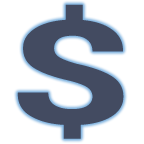
<style>
.page{position:relative;width:144px;height:144px;background:#ffffff}
.page>*{position:absolute;margin:0}
.t1{font:144px "Roboto-Bold";color:#4c4f58;scale:1.5 1}
</style>
<div class="page">
<p class="t1" style="left:17px;top:4px;width:107px;height:135px">$</p>
</div>
